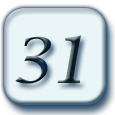
<style>
.page{position:relative;width:115px;height:115px;background:#e9f5f6}
.page>*{position:absolute;margin:0}
.t1{font:66.7px "LucidaCalligraphy-Italic";scale:1.05 1}
.t2{font:87.5px "LucidaCalligraphy-Italic";scale:0.85 1}
</style>
<div class="page">
<p class="t1" style="left:15px;top:36px;width:36px;height:48px">3</p>
<p class="t2" style="left:57px;top:35px;width:24px;height:48px">1</p>
</div>
